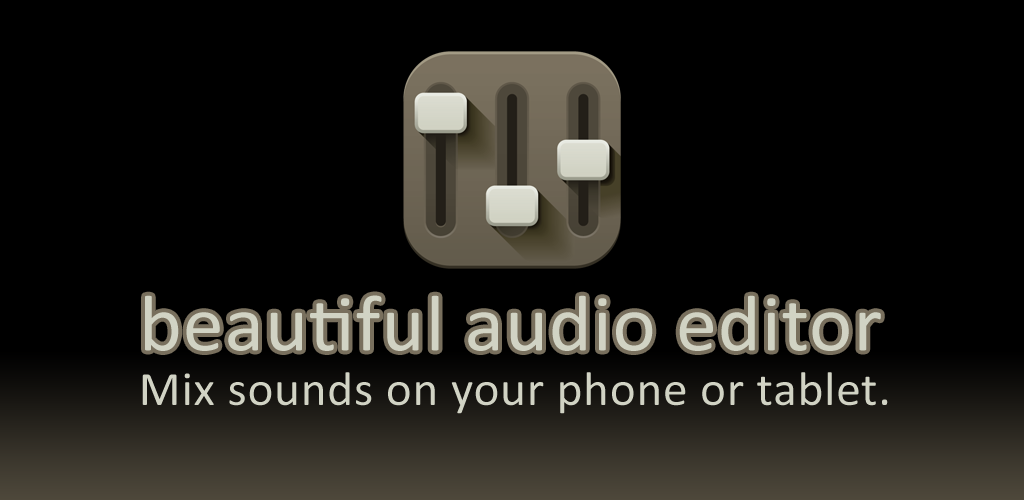
<style>
.page{position:relative;width:1024px;height:500px;background:#000000}
.page>*{position:absolute;margin:0}
.t1{font:80.2px "Calibri";letter-spacing:0.01em;color:#d1d3c4}
.t2{font:48px "Calibri";letter-spacing:0.015em;color:#d1d3c4}
</style>
<div class="page">
<p class="t1" style="left:145px;top:295px;width:736px;height:56px">beautiful audio editor</p>
<p class="t2" style="left:142px;top:372px;width:746px;height:42px">Mix sounds on your phone or tablet.</p>
</div>
